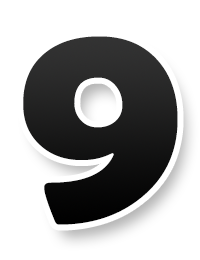
<style>
.page{position:relative;width:200px;height:260px;background:#ffffff}
.page>*{position:absolute;margin:0}
.t1{font:300px "BerlinSansFBDemi-Bold";color:#1c1c1c}
</style>
<div class="page">
<p class="t1" style="left:23px;top:36px;width:155px;height:189px">9</p>
</div>
